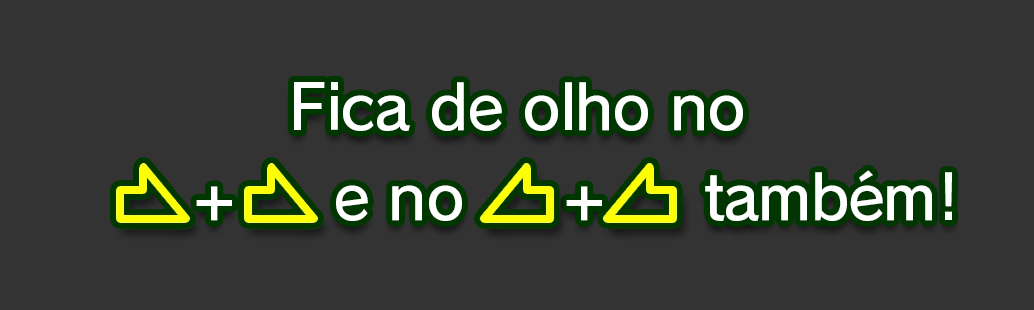
<style>
.page{position:relative;width:1034px;height:310px;background:#333333}
.page>*{position:absolute;margin:0}
.t1{font:61.3px/90.7px "RodinPro-DB";letter-spacing:-0.022em;color:#ffffff}
</style>
<div class="page">
<p class="t1" style="left:196px;top:82px;width:756px;height:139px;text-align:center">Fica de olho no<br>      +     e no     +     também!</p>
</div>
